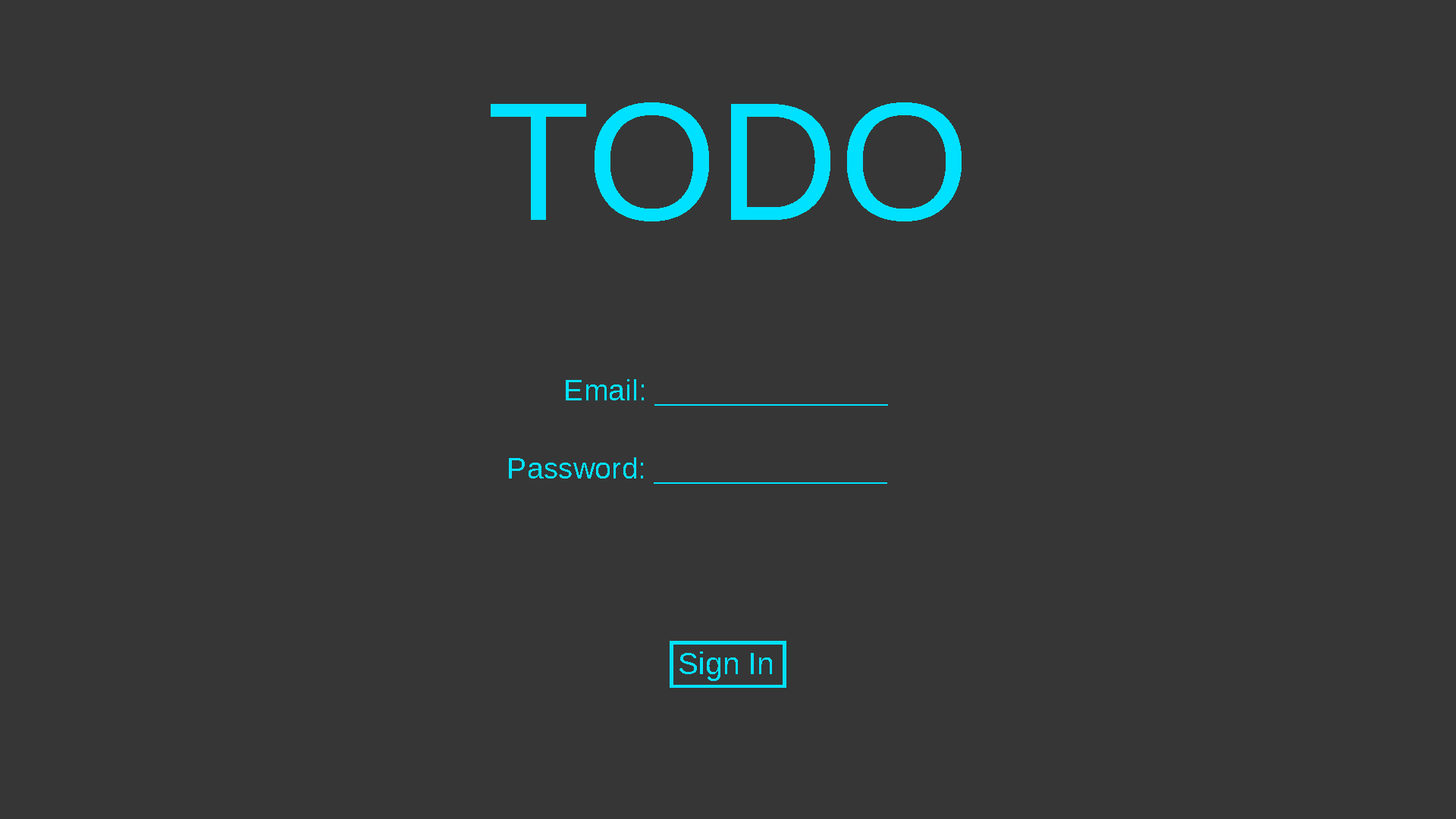
<style>
.page{position:relative;width:1456px;height:819px;background:#363636}
.page>*{position:absolute;margin:0}
.t1{font:168.2px "Arimo";color:#00e1ff}
.t2{font:29.9px "Arimo";color:#00e1ff}
.t3{font:31px "Arimo";color:#00e1ff}
</style>
<div class="page">
<p class="t1" style="left:491px;top:102px;width:471px;height:119px">TODO</p>
<p class="t2" style="left:566px;top:379px;width:322px;height:27px">Email: ______________</p>
<p class="t2" style="left:509px;top:457px;width:378px;height:27px">Password: ______________</p>
<p class="t3" style="left:679px;top:651px;width:93px;height:30px">Sign In</p>
</div>
